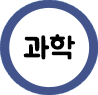
<style>
.page{position:relative;width:98px;height:95px;background:#ffffff}
.page>*{position:absolute;margin:0}
.t1{font:30px "BMJUA";color:#000000}
</style>
<div class="page">
<p class="t1" style="left:23px;top:34px;width:52px;height:26px">과학</p>
</div>
